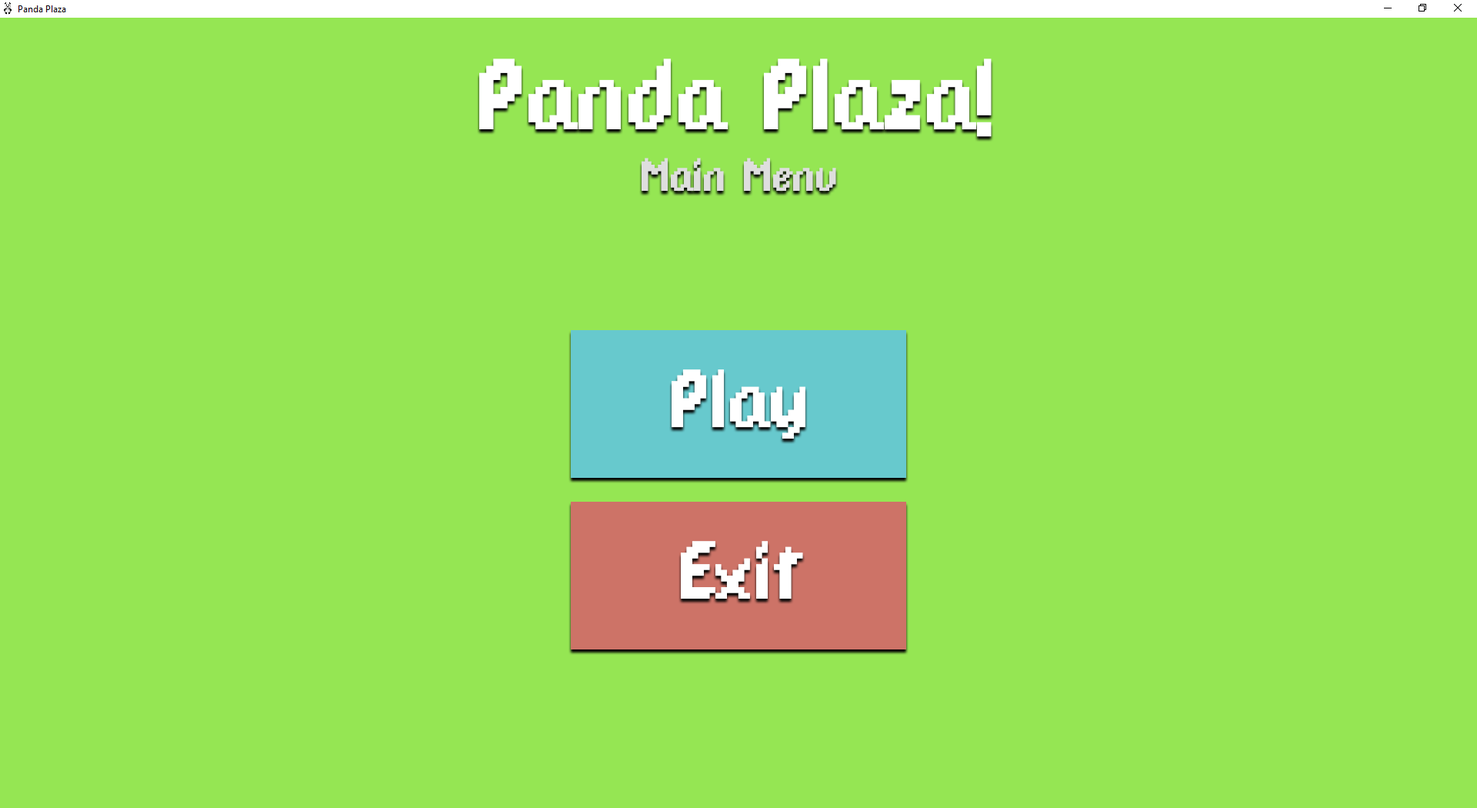
<style>
.page{position:relative;width:1477px;height:808px;background:#95e653}
.page>*{position:absolute;margin:0}
.t1{font:109.2px "DPComicRegular";color:#ffffff}
.t2{font:50.8px "DPComicRegular";color:#dedede}
.t3{font:89.2px "DPComicRegular";color:#ffffff}
</style>
<div class="page">
<p class="t1" style="left:479px;top:58px;width:512px;height:79px">Panda Plaza!</p>
<p class="t2" style="left:641px;top:158px;width:195px;height:33px">Main Menu</p>
<p class="t3" style="left:671px;top:369px;width:134px;height:69px">Play</p>
<p class="t3" style="left:681px;top:541px;width:122px;height:57px">Exit</p>
</div>
